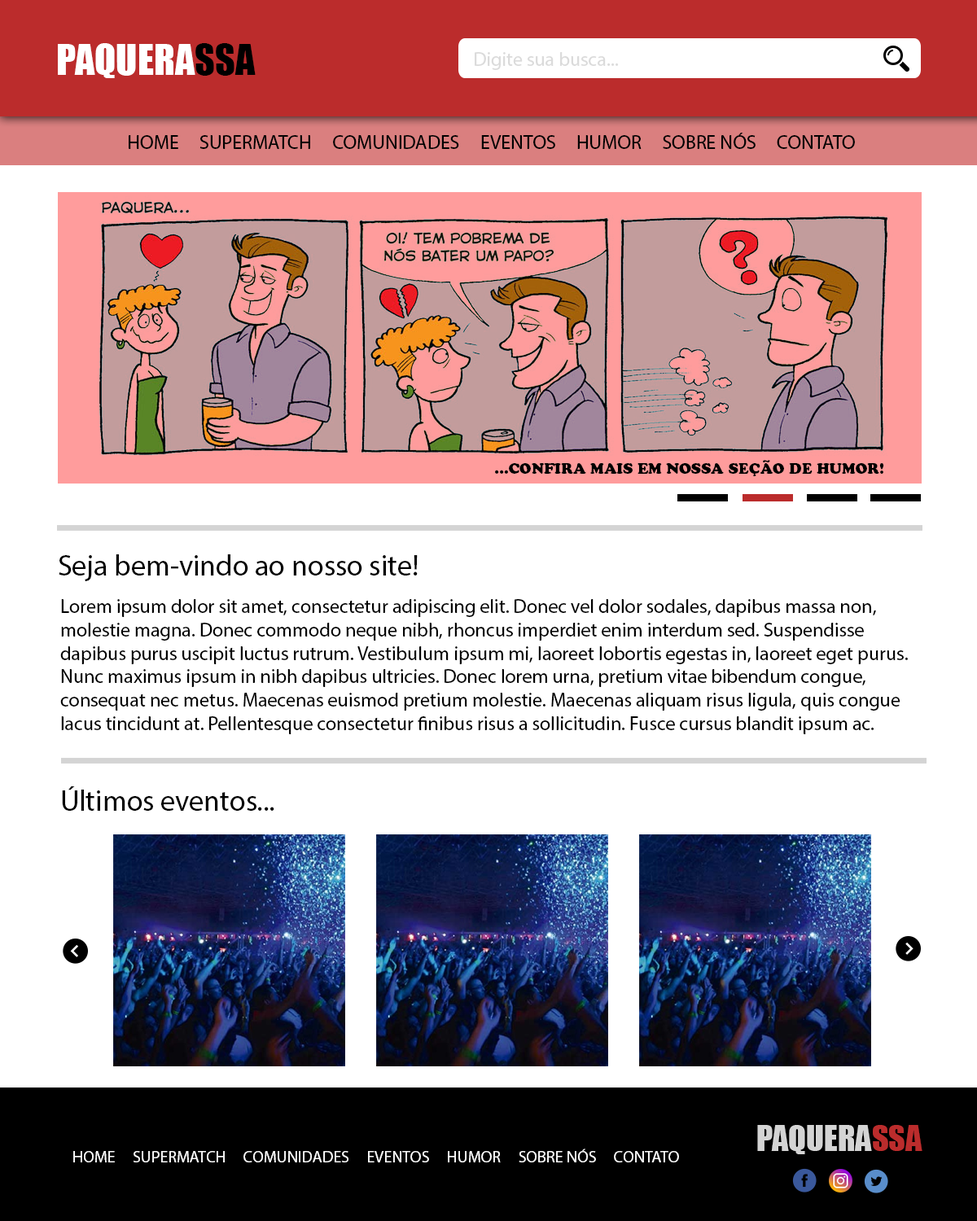
<style>
.page{position:relative;width:977px;height:1221px;background:#ffffff}
.page>*{position:absolute;margin:0}
.t1{font:39.1px "Impact";color:#ffffff}
.t2{font:39.1px "Impact";color:#000000}
.t3{font:19.5px "MyriadPro-Regular";color:#dbdbdb}
.t4{font:19.5px "MyriadPro-Regular";color:#000000}
.t5{font:14.7px "CooperBlackStd";color:#000000}
.t6{font:29.3px "MyriadPro-Regular";color:#000000}
.t7{font:32.6px "Impact";color:#d4d4d4}
.t8{font:32.6px "Impact";color:#bb2c2c}
.t9{font:16.3px "MyriadPro-Regular";color:#ffffff}
</style>
<div class="page">
<p class="t1" style="left:58px;top:43px;width:198px;height:35px">PAQUERA<span class="t2">SSA</span></p>
<p class="t3" style="left:475px;top:52px;width:144px;height:18px">Digite sua busca...</p>
<p class="t4" style="left:129px;top:133px;width:726px;height:16px">HOME     SUPERMATCH     COMUNIDADES     EVENTOS     HUMOR     SOBRE NÓS     CONTATO</p>
<p class="t5" style="left:495px;top:460px;width:389px;height:16px">...CONFIRA MAIS EM NOSSA SEÇÃO DE HUMOR!</p>
<p class="t6" style="left:59px;top:554px;width:359px;height:27px">Seja bem-vindo ao nosso site!</p>
<p class="t4" style="left:60px;top:599px;width:848px;height:135px">Lorem ipsum dolor sit amet, consectetur adipiscing elit. Donec vel dolor sodales, dapibus massa non, <br>molestie magna. Donec commodo neque nibh, rhoncus imperdiet enim interdum sed. Suspendisse <br>dapibus purus uscipit luctus rutrum. Vestibulum ipsum mi, laoreet lobortis egestas in, laoreet eget purus. <br>Nunc maximus ipsum in nibh dapibus ultricies. Donec lorem urna, pretium vitae bibendum congue, <br>consequat nec metus. Maecenas euismod pretium molestie. Maecenas aliquam risus ligula, quis congue <br>lacus tincidunt at. Pellentesque consectetur finibus risus a sollicitudin. Fusce cursus blandit ipsum ac.</p>
<p class="t6" style="left:62px;top:786px;width:212px;height:25px">Últimos eventos...</p>
<p class="t7" style="left:757px;top:1125px;width:165px;height:29px">PAQUERA<span class="t8">SSA</span></p>
<p class="t9" style="left:73px;top:1148px;width:606px;height:14px">HOME     SUPERMATCH     COMUNIDADES     EVENTOS     HUMOR     SOBRE NÓS     CONTATO</p>
</div>
